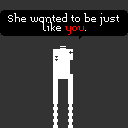
<style>
.page{position:relative;width:128px;height:128px;background:#333333}
.page>*{position:absolute;margin:0}
.t1{font:8px "Memoria";color:#ffffff}
.t2{font:8px "Memoria";color:#ff0000}
</style>
<div class="page">
<p class="t1" style="left:8px;top:13px;width:111px;height:22px;text-align:center">She wanted to be just<br>like <span class="t2">you</span>.</p>
</div>
